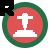
<style>
.page{position:relative;width:50px;height:50px;background:#ffffff}
.page>*{position:absolute;margin:0}
.t1{font:24px "PropagandaRegular";letter-spacing:0.1em;color:#000000}
</style>
<div class="page">
<p class="t1" style="left:0px;top:0px;width:14px;height:16px">r</p>
</div>
